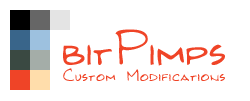
<style>
.page{position:relative;width:250px;height:101px;background:#ffffff}
.page>*{position:absolute;margin:0}
.t1{font:52px "Kilroy-WasHere";color:#ef4427}
.t2{font:18px "Kilroy-WasHere";letter-spacing:0.035em;color:#ef4427}
</style>
<div class="page">
<p class="t1" style="left:63px;top:29px;width:162px;height:37px">bitPimps</p>
<p class="t2" style="left:63px;top:68px;width:162px;height:14px">Custom Modifications</p>
</div>
